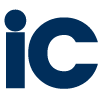
<style>
.page{position:relative;width:100px;height:100px;background:#ffffff}
.page>*{position:absolute;margin:0}
.t1{font:96px "Poppins";letter-spacing:-0.075em;color:#002e5b;font-weight:bold}
</style>
<div class="page">
<p class="t1" style="left:4px;top:9px;width:94px;height:80px">iC</p>
</div>
